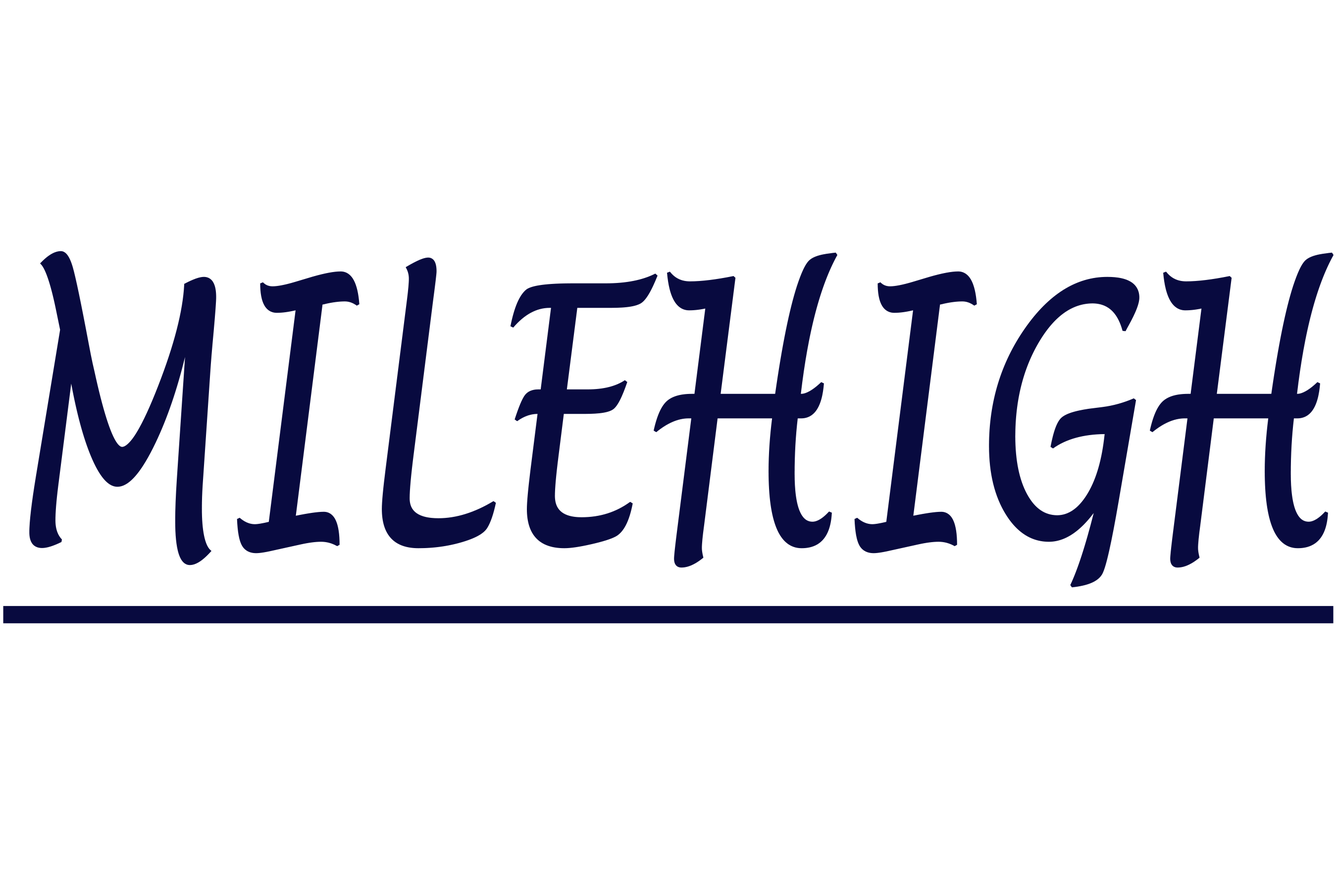
<style>
.page{position:relative;width:1337px;height:892px;background:#ffffff}
.page>*{position:absolute;margin:0}
.t1{font:353.1px "LucidaHandwriting-Italic";color:#080a3f;font-weight:bold;text-decoration:underline;scale:0.64 1}
</style>
<div class="page">
<p class="t1" style="left:3px;top:251px;width:1331px;height:372px">MILEHIGH</p>
</div>
